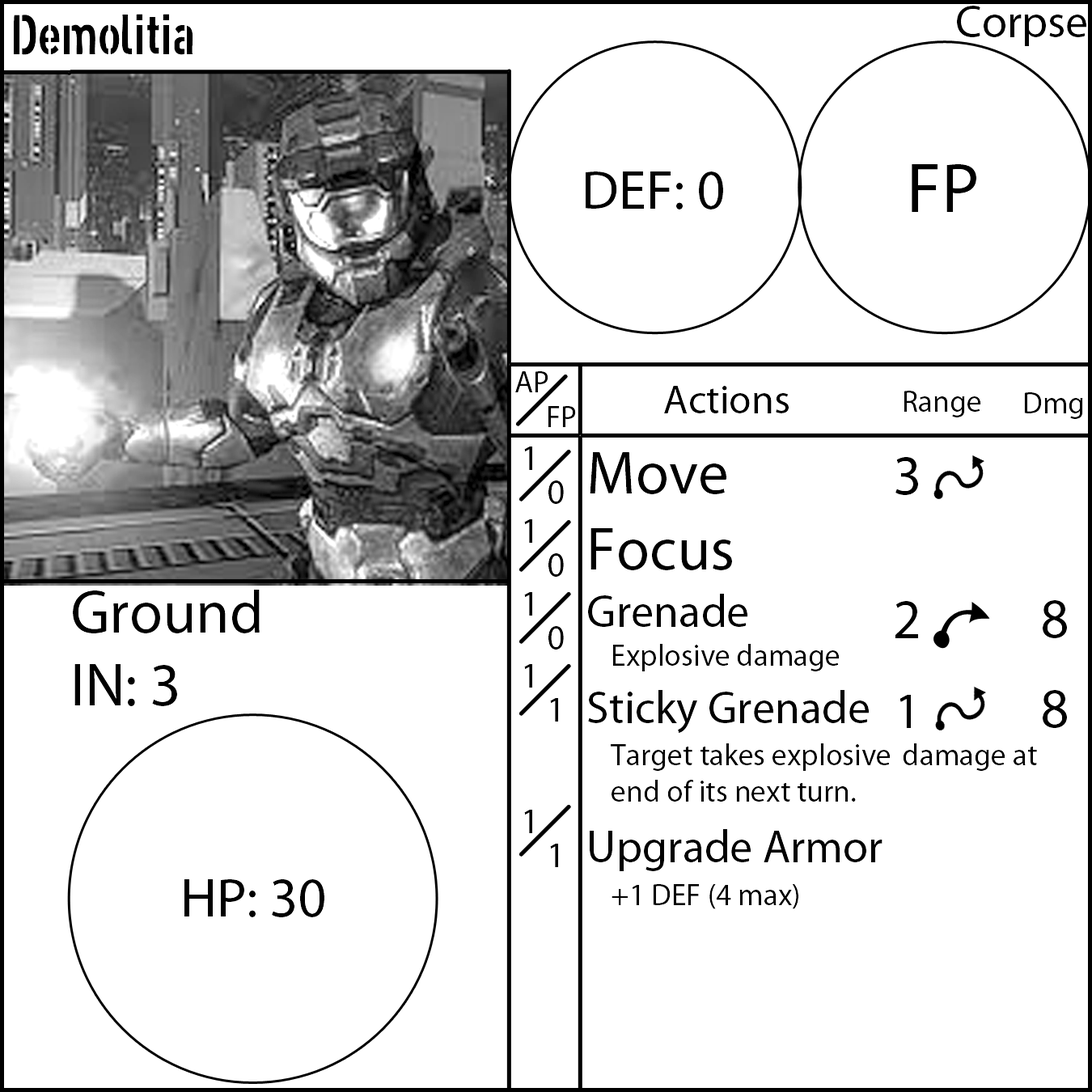
<style>
.page{position:relative;width:1092px;height:1092px;background:#ffffff}
.page>*{position:absolute;margin:0}
.t1{font:55.6px "XXIISTRAIGHT-ARMY";color:#000000}
.t2{font:55.6px "MyriadPro-Regular";color:#000000}
.t3{font:70.8px "MyriadPro-Regular";color:#000000}
.t4{font:30.3px "MyriadPro-Regular";color:#000000}
.t5{font:40.4px "MyriadPro-Regular";color:#000000}
.t6{font:35.4px "MyriadPro-Regular";color:#000000}
.t7{font:60.7px "MyriadPro-Regular";color:#000000}
.t8{font:45.5px "MyriadPro-Regular";color:#000000}
.t9{font:50.6px "MyriadPro-Regular";color:#000000}
</style>
<div class="page">
<p class="t1" style="left:14px;top:14px;width:179px;height:41px">Demolitia</p>
<p class="t2" style="left:586px;top:171px;width:137px;height:38px">DEF: 0</p>
<p class="t3" style="left:912px;top:164px;width:64px;height:48px">FP</p>
<p class="t4" style="left:515px;top:371px;width:33px;height:21px">AP</p>
<p class="t5" style="left:664px;top:386px;width:125px;height:27px">Actions</p>
<p class="t4" style="left:904px;top:391px;width:77px;height:26px">Range</p>
<p class="t4" style="left:1024px;top:392px;width:59px;height:27px">Dmg</p>
<p class="t4" style="left:548px;top:406px;width:28px;height:21px">FP</p>
<p class="t6" style="left:524px;top:447px;width:8px;height:386px">1<br>1<br>1<br>1<br><br>1</p>
<p class="t4" style="left:588px;top:452px;width:449px;height:457px"><span class="t7">Move<br>Focus<br></span><span class="t8">Grenade<br></span> Explosive damage<br><span class="t8">Sticky Grenade<br></span> Target takes explosive  damage at     end of its next turn.<br><span class="t8">Upgrade Armor<br></span> +1 DEF (4 max)</p>
<p class="t2" style="left:895px;top:457px;width:23px;height:271px;text-align:center">3<br><br>2<br><span class="t9">1</span></p>
<p class="t6" style="left:548px;top:480px;width:16px;height:387px">0<br>0<br>0<br>1<br><br>1</p>
<p class="t7" style="left:73px;top:590px;width:187px;height:116px">Ground<br>IN: 3</p>
<p class="t2" style="left:1043px;top:600px;width:24px;height:128px;text-align:center">8 <br>8</p>
<p class="t2" style="left:184px;top:879px;width:140px;height:38px">HP: 30</p>
</div>
